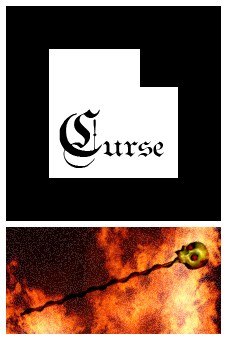
<style>
.page{position:relative;width:227px;height:340px;background:#000000}
.page>*{position:absolute;margin:0}
.t1{font:30px "TeutonicNo1-DemiBold";color:#000000}
.t2{font:60.2px "TeutonicNo1-DemiBold";color:#000000}
</style>
<div class="page">
<p class="t1" style="left:59px;top:109px;width:105px;height:59px"><span class="t2">C</span>urse</p>
</div>
